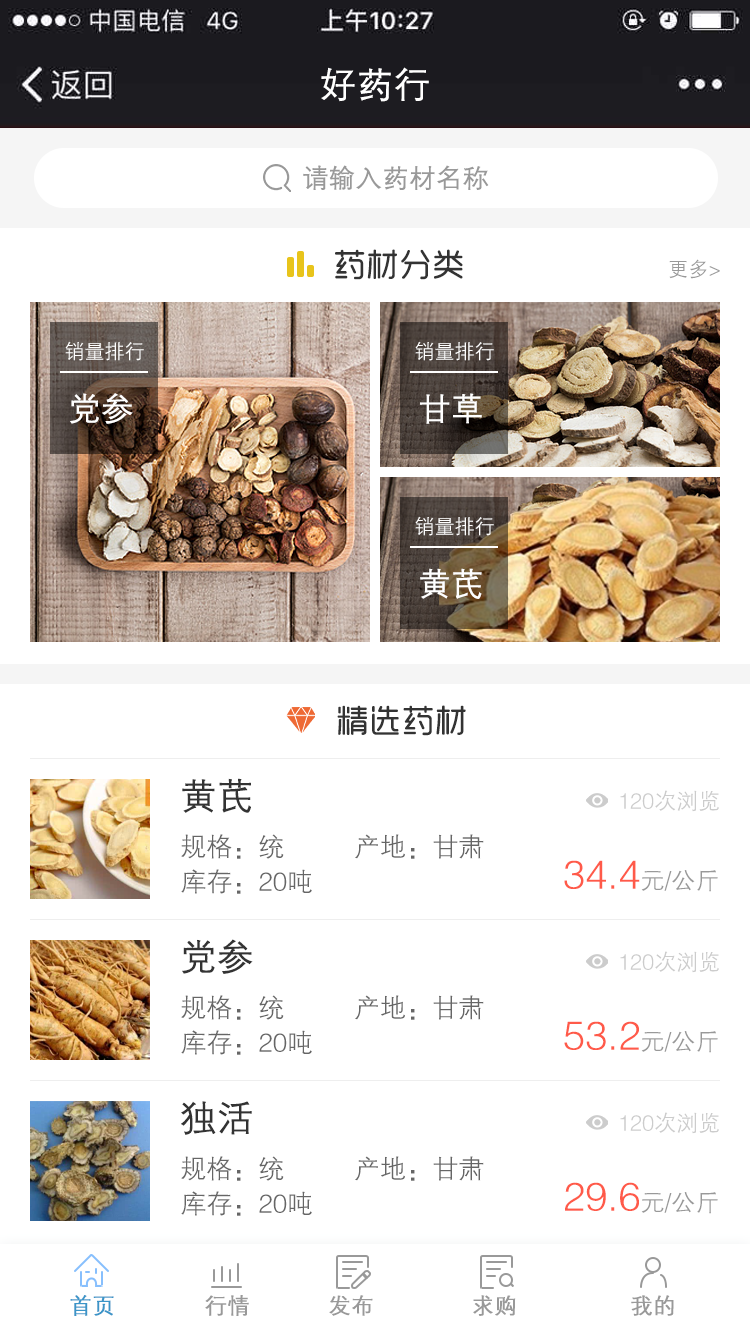
<style>
.page{position:relative;width:750px;height:1334px;background:#ffffff}
.page>*{position:absolute;margin:0}
.t1{font:36px "FZZDXJW--GB1-0";color:#ffffff;font-weight:bold}
.t2{font:26px "FZZDXJW--GB1-0";color:#999999;font-weight:bold}
.t3{font:32.1px "RTWSYueRoudGoDemo-Regular";color:#333333;font-weight:bold}
.t4{font:20px "FZZDXJW--GB1-0";color:#999999}
.t5{font:20px "FZZDXJW--GB1-0";color:#ffffff}
.t6{font:32px "FZZDXJW--GB1-0";color:#ffffff;font-weight:bold}
.t7{font:32px "RTWSYueRoudGoDemo-Regular";color:#333333;font-weight:bold}
.t8{font:36px "FZZDXJW--GB1-0";color:#333333;font-weight:bold}
.t9{font:22px "FZZDXJW--GB1-0";color:#cccccc}
.t10{font:26px "FZZDXJW--GB1-0";color:#666666}
.t11{font:40px "FZZDXJW--GB1-0";color:#ff5a49}
.t12{font:24px "FZZDXJW--GB1-0";color:#999999}
.t13{font:22px "FZZDXJW--GB1-0";color:#3b95c8;font-weight:bold}
.t14{font:22px "FZZDXJW--GB1-0";color:#999999;font-weight:bold}
</style>
<div class="page">
<p class="t1" style="left:321px;top:67px;width:108px;height:35px">好药行</p>
<p class="t2" style="left:303px;top:165px;width:186px;height:25px">请输入药材名称</p>
<p class="t3" style="left:335px;top:249px;width:128px;height:31px">药材分类</p>
<p class="t4" style="left:669px;top:259px;width:51px;height:20px">更多&gt;</p>
<p class="t5" style="left:65px;top:341px;width:79px;height:20px">销量排行</p>
<p class="t5" style="left:415px;top:341px;width:79px;height:20px">销量排行</p>
<p class="t6" style="left:70px;top:393px;width:63px;height:31px">党参</p>
<p class="t6" style="left:420px;top:393px;width:62px;height:31px">甘草</p>
<p class="t5" style="left:415px;top:516px;width:79px;height:20px">销量排行</p>
<p class="t6" style="left:420px;top:568px;width:62px;height:31px">黄芪</p>
<p class="t7" style="left:337px;top:705px;width:129px;height:31px">精选药材</p>
<p class="t8" style="left:182px;top:778px;width:69px;height:35px">黄芪</p>
<p class="t9" style="left:620px;top:790px;width:99px;height:22px">120次浏览</p>
<p class="t10" style="left:181px;top:834px;width:103px;height:25px">规格：统</p>
<p class="t10" style="left:355px;top:834px;width:129px;height:25px">产地：甘肃</p>
<p class="t10" style="left:181px;top:869px;width:131px;height:25px">库存：20吨</p>
<p class="t11" style="left:564px;top:860px;width:154px;height:32px">34.4<span class="t12">元/公斤</span></p>
<p class="t8" style="left:182px;top:939px;width:71px;height:35px">党参</p>
<p class="t9" style="left:620px;top:951px;width:99px;height:22px">120次浏览</p>
<p class="t10" style="left:181px;top:995px;width:103px;height:25px">规格：统</p>
<p class="t10" style="left:355px;top:995px;width:129px;height:25px">产地：甘肃</p>
<p class="t11" style="left:564px;top:1021px;width:154px;height:32px">53.2<span class="t12">元/公斤</span></p>
<p class="t10" style="left:181px;top:1030px;width:131px;height:25px">库存：20吨</p>
<p class="t8" style="left:181px;top:1101px;width:71px;height:34px">独活</p>
<p class="t9" style="left:620px;top:1112px;width:99px;height:22px">120次浏览</p>
<p class="t10" style="left:181px;top:1156px;width:103px;height:25px">规格：统</p>
<p class="t10" style="left:355px;top:1156px;width:129px;height:25px">产地：甘肃</p>
<p class="t11" style="left:565px;top:1182px;width:153px;height:32px">29.6<span class="t12">元/公斤</span></p>
<p class="t10" style="left:181px;top:1191px;width:131px;height:25px">库存：20吨</p>
<p class="t13" style="left:70px;top:1295px;width:44px;height:21px">首页</p>
<p class="t14" style="left:205px;top:1295px;width:44px;height:21px">行情</p>
<p class="t14" style="left:329px;top:1295px;width:44px;height:21px">发布</p>
<p class="t14" style="left:473px;top:1295px;width:43px;height:21px">求购</p>
<p class="t14" style="left:631px;top:1295px;width:43px;height:21px">我的</p>
</div>
